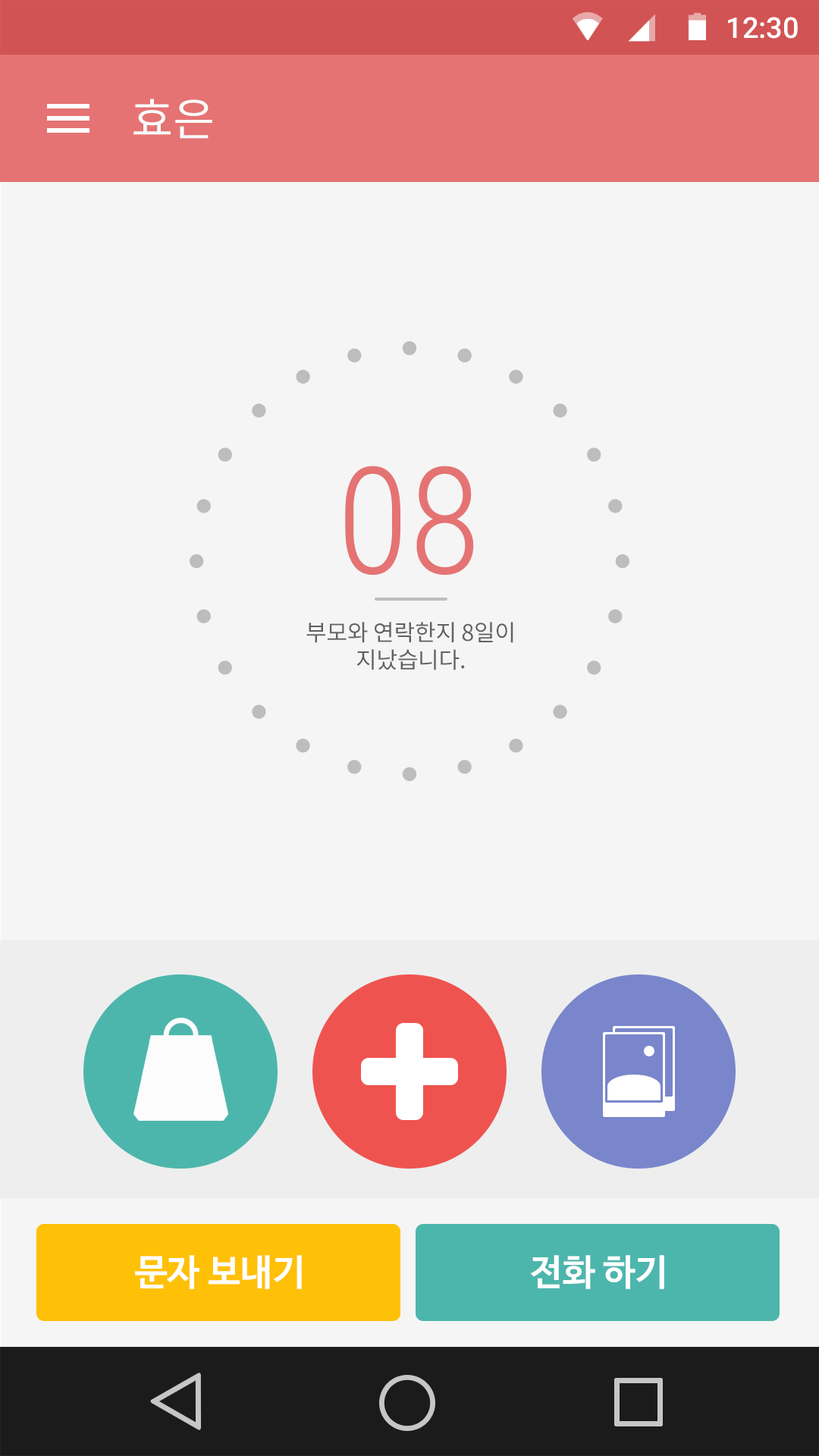
<style>
.page{position:relative;width:819px;height:1456px;background:#f5f5f5}
.page>*{position:absolute;margin:0}
.t1{font:28.8px "Roboto-Medium";color:#ffffff}
.t2{font:45.5px "NotoSansCJKkr-Regular";letter-spacing:-0.005em;color:#fafafa}
.t3{font:148.6px "RobotoCondensed-Light";letter-spacing:-0.005em;color:#e57373}
.t4{font:22.7px/27.3px "NotoSansCJKkr-Regular";letter-spacing:-0.005em;color:#616161}
.t5{font:36.4px "NanumBarunGothicBold";color:#ffffff}
</style>
<div class="page">
<p class="t1" style="left:728px;top:17px;width:70px;height:22px">12:30</p>
<p class="t2" style="left:133px;top:99px;width:79px;height:40px">효은</p>
<p class="t3" style="left:345px;top:466px;width:129px;height:109px">08</p>
<p class="t4" style="left:306px;top:622px;width:207px;height:48px;text-align:center">부모와 연락한지 8일이<br>지났습니다.</p>
<p class="t5" style="left:135px;top:1255px;width:167px;height:34px">문자 보내기</p>
<p class="t5" style="left:530px;top:1255px;width:134px;height:34px">전화 하기</p>
</div>
